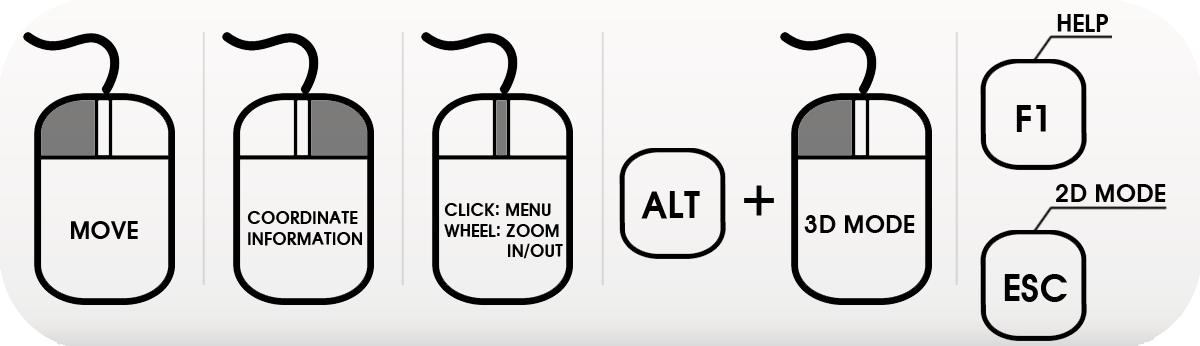
<style>
.page{position:relative;width:1200px;height:346px}
.page>*{position:absolute;margin:0}
.t1{font:24px "HYwulB";letter-spacing:-0.025em;color:#000000;text-transform:uppercase}
.t2{font:36px "HYwulB";letter-spacing:-0.025em;color:#000000;text-transform:uppercase}
.t3{font:48px "HYwulB";letter-spacing:-0.025em;color:#000000;text-transform:uppercase}
.t4{font:17px "HYwulB";letter-spacing:-0.025em;color:#000000;text-transform:uppercase}
</style>
<div class="page">
<p class="t1" style="left:1057px;top:14px;width:51px;height:18px">Help</p>
<p class="t2" style="left:1016px;top:105px;width:30px;height:27px">F1</p>
<p class="t3" style="left:744px;top:185px;width:30px;height:31px">+</p>
<p class="t1" style="left:1056px;top:184px;width:110px;height:18px">2D mode</p>
<p class="t2" style="left:641px;top:191px;width:59px;height:28px">Alt</p>
<p class="t4" style="left:444px;top:203px;width:119px;height:56px">Click: menu<br>Wheel: Zoom <br>            in/out</p>
<p class="t1" style="left:71px;top:221px;width:67px;height:18px">Move</p>
<p class="t4" style="left:247px;top:211px;width:115px;height:35px">Coordinate<br>information</p>
<p class="t1" style="left:804px;top:215px;width:111px;height:18px">3D mode</p>
<p class="t2" style="left:1004px;top:274px;width:63px;height:28px">ESC</p>
</div>
